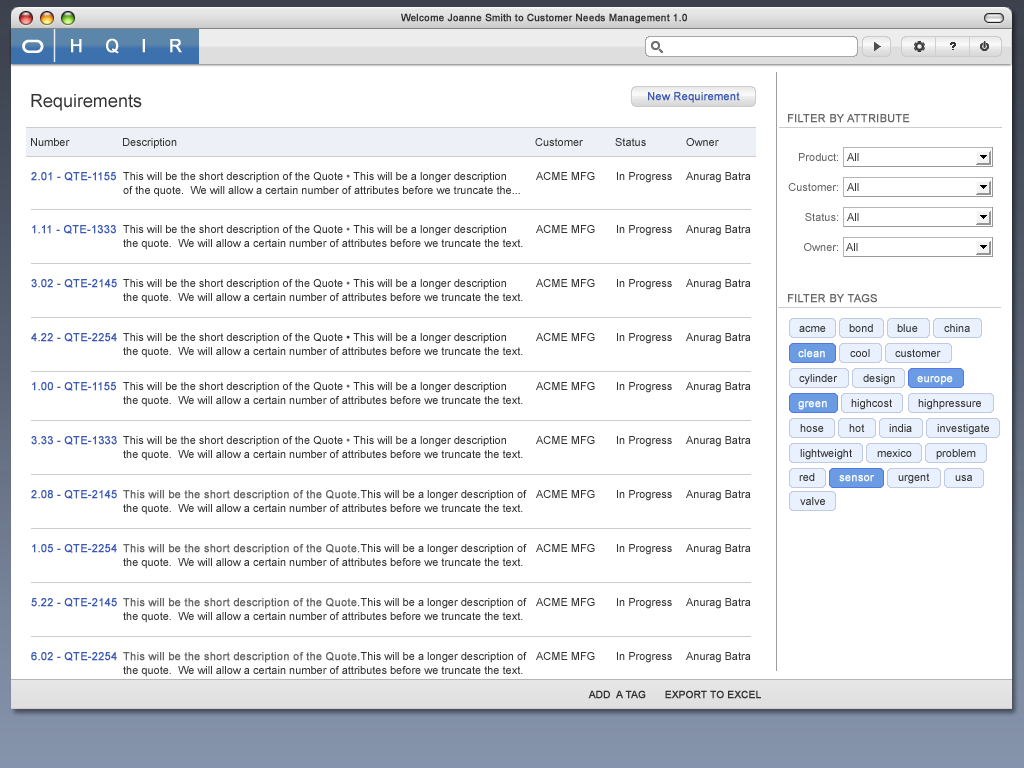
<style>
.page{position:relative;width:1024px;height:768px;background:#ffffff}
.page>*{position:absolute;margin:0}
.t1{font:10px "ArialMT";color:#333333;font-weight:bold}
.t2{font:18px "ArialMT";color:#ffffff;font-weight:bold}
.t3{font:18px "ArialMT";color:#333333}
.t4{font:11px "ArialMT";color:#3c5ab3;font-weight:bold}
.t5{font:11px "ArialMT";color:#666666;text-transform:uppercase;font-weight:bold}
.t6{font:11px "ArialMT";color:#333333}
.t7{font:11px "ArialMT";color:#666666}
.t8{font:11px/14px "ArialMT";color:#333333}
.t9{font:11px/20px "ArialMT";color:#333333}
.t10{font:11px/20px "ArialMT";color:#666666}
.t11{font:11px "ArialMT";color:#ffffff;font-weight:bold}
.t12{font:11px/20px "ArialMT";color:#666666;font-weight:bold}
.t13{font:10px "ArialMT";color:#333333;text-transform:uppercase;font-weight:bold}
</style>
<div class="page">
<p class="t1" style="left:401px;top:13px;width:286px;height:11px">Welcome Joanne Smith to Customer Needs Management 1.0</p>
<p class="t2" style="left:71px;top:38px;width:111px;height:16px">H    Q    I    R</p>
<p class="t3" style="left:31px;top:94px;width:111px;height:17px">Requirements</p>
<p class="t4" style="left:648px;top:92px;width:92px;height:11px">New Requirement</p>
<p class="t5" style="left:788px;top:114px;width:122px;height:9px">Filter by attribute</p>
<p class="t6" style="left:31px;top:138px;width:39px;height:8px">Number</p>
<p class="t6" style="left:123px;top:138px;width:54px;height:11px">Description</p>
<p class="t6" style="left:535px;top:138px;width:48px;height:8px">Customer</p>
<p class="t6" style="left:615px;top:138px;width:31px;height:8px">Status</p>
<p class="t6" style="left:686px;top:138px;width:33px;height:8px">Owner</p>
<p class="t7" style="left:799px;top:153px;width:39px;height:8px">Product:</p>
<p class="t6" style="left:847px;top:153px;width:12px;height:8px">All</p>
<p class="t4" style="left:31px;top:172px;width:85px;height:9px">2.01 - QTE-1155</p>
<p class="t8" style="left:123px;top:172px;width:397px;height:25px"><span class="t9">This will be the short description of the Quote </span><span class="t10">• </span>This will be a longer description <br>of the quote.  We will allow a certain number of attributes before we truncate the...</p>
<p class="t6" style="left:536px;top:172px;width:59px;height:8px">ACME MFG</p>
<p class="t6" style="left:617px;top:172px;width:55px;height:11px">In Progress</p>
<p class="t6" style="left:686px;top:172px;width:65px;height:11px">Anurag Batra</p>
<p class="t7" style="left:788px;top:183px;width:50px;height:8px">Customer:</p>
<p class="t6" style="left:847px;top:183px;width:12px;height:8px">All</p>
<p class="t7" style="left:805px;top:213px;width:33px;height:8px">Status:</p>
<p class="t6" style="left:847px;top:213px;width:12px;height:8px">All</p>
<p class="t4" style="left:32px;top:225px;width:84px;height:9px">1.11 - QTE-1333</p>
<p class="t8" style="left:123px;top:225px;width:400px;height:25px"><span class="t9">This will be the short description of the Quote</span><span class="t10"> • </span>This will be a longer description  <br>the quote.  We will allow a certain number of attributes before we truncate the text.</p>
<p class="t6" style="left:536px;top:225px;width:59px;height:8px">ACME MFG</p>
<p class="t6" style="left:617px;top:225px;width:55px;height:11px">In Progress</p>
<p class="t6" style="left:686px;top:225px;width:65px;height:11px">Anurag Batra</p>
<p class="t7" style="left:804px;top:243px;width:34px;height:8px">Owner:</p>
<p class="t6" style="left:846px;top:243px;width:12px;height:8px">All</p>
<p class="t4" style="left:31px;top:279px;width:86px;height:9px">3.02 - QTE-2145</p>
<p class="t8" style="left:123px;top:279px;width:400px;height:25px"><span class="t9">This will be the short description of the Quote</span><span class="t10"> • </span>This will be a longer description <br>the quote.  We will allow a certain number of attributes before we truncate the text.</p>
<p class="t6" style="left:536px;top:279px;width:59px;height:8px">ACME MFG</p>
<p class="t6" style="left:617px;top:279px;width:55px;height:11px">In Progress</p>
<p class="t6" style="left:686px;top:279px;width:65px;height:11px">Anurag Batra</p>
<p class="t5" style="left:788px;top:294px;width:89px;height:9px">filter By tags</p>
<p class="t6" style="left:799px;top:326px;width:27px;height:6px">acme</p>
<p class="t6" style="left:849px;top:324px;width:24px;height:8px">bond</p>
<p class="t6" style="left:897px;top:324px;width:21px;height:8px">blue</p>
<p class="t6" style="left:944px;top:324px;width:26px;height:8px">china</p>
<p class="t4" style="left:31px;top:333px;width:86px;height:9px">4.22 - QTE-2254</p>
<p class="t8" style="left:123px;top:333px;width:400px;height:25px"><span class="t9">This will be the short description of the Quote • </span>This will be a longer description<br>the quote.  We will allow a certain number of attributes before we truncate the text.</p>
<p class="t6" style="left:536px;top:333px;width:59px;height:8px">ACME MFG</p>
<p class="t6" style="left:617px;top:333px;width:55px;height:11px">In Progress</p>
<p class="t6" style="left:686px;top:333px;width:65px;height:11px">Anurag Batra</p>
<p class="t11" style="left:798px;top:349px;width:27px;height:9px">clean</p>
<p class="t6" style="left:850px;top:349px;width:20px;height:8px">cool</p>
<p class="t6" style="left:895px;top:349px;width:46px;height:8px">customer</p>
<p class="t6" style="left:799px;top:374px;width:39px;height:11px">cylinder</p>
<p class="t6" style="left:863px;top:374px;width:32px;height:11px">design</p>
<p class="t11" style="left:917px;top:376px;width:36px;height:9px">europe</p>
<p class="t4" style="left:32px;top:382px;width:84px;height:9px">1.00 - QTE-1155</p>
<p class="t8" style="left:123px;top:382px;width:400px;height:25px"><span class="t9">This will be the short description of the Quote</span><span class="t10"> • </span>This will be a longer description <br>the quote.  We will allow a certain number of attributes before we truncate the text.</p>
<p class="t6" style="left:536px;top:382px;width:59px;height:8px">ACME MFG</p>
<p class="t6" style="left:617px;top:382px;width:55px;height:11px">In Progress</p>
<p class="t6" style="left:686px;top:382px;width:65px;height:11px">Anurag Batra</p>
<p class="t11" style="left:798px;top:401px;width:29px;height:9px">green</p>
<p class="t6" style="left:851px;top:399px;width:41px;height:11px">highcost</p>
<p class="t6" style="left:918px;top:399px;width:63px;height:11px">highpressure</p>
<p class="t6" style="left:800px;top:424px;width:24px;height:8px">hose</p>
<p class="t6" style="left:849px;top:424px;width:16px;height:8px">hot</p>
<p class="t6" style="left:889px;top:424px;width:23px;height:8px">india</p>
<p class="t6" style="left:937px;top:424px;width:52px;height:11px">investigate</p>
<p class="t4" style="left:31px;top:436px;width:86px;height:9px">3.33 - QTE-1333</p>
<p class="t8" style="left:123px;top:436px;width:400px;height:25px"><span class="t9">This will be the short description of the Quote</span><span class="t10"> • </span>This will be a longer description  <br>the quote.  We will allow a certain number of attributes before we truncate the text.</p>
<p class="t6" style="left:536px;top:436px;width:59px;height:8px">ACME MFG</p>
<p class="t6" style="left:617px;top:436px;width:55px;height:11px">In Progress</p>
<p class="t6" style="left:686px;top:436px;width:65px;height:11px">Anurag Batra</p>
<p class="t6" style="left:800px;top:449px;width:52px;height:11px">lightweight</p>
<p class="t6" style="left:877px;top:449px;width:35px;height:8px">mexico</p>
<p class="t6" style="left:936px;top:449px;width:40px;height:11px">problem</p>
<p class="t6" style="left:799px;top:473px;width:16px;height:8px">red</p>
<p class="t6" style="left:898px;top:473px;width:32px;height:11px">urgent</p>
<p class="t11" style="left:839px;top:475px;width:35px;height:7px">sensor</p>
<p class="t6" style="left:955px;top:475px;width:17px;height:6px">usa</p>
<p class="t4" style="left:31px;top:490px;width:86px;height:9px">2.08 - QTE-2145</p>
<p class="t8" style="left:123px;top:490px;width:404px;height:25px"><span class="t12">This will be the short description of the Quote.</span>This will be a longer description of <br>the quote.  We will allow a certain number of attributes before we truncate the text.</p>
<p class="t6" style="left:536px;top:490px;width:59px;height:8px">ACME MFG</p>
<p class="t6" style="left:617px;top:490px;width:55px;height:11px">In Progress</p>
<p class="t6" style="left:686px;top:490px;width:65px;height:11px">Anurag Batra</p>
<p class="t6" style="left:800px;top:497px;width:25px;height:8px">valve</p>
<p class="t4" style="left:32px;top:544px;width:85px;height:9px">1.05 - QTE-2254</p>
<p class="t8" style="left:123px;top:544px;width:404px;height:25px"><span class="t12">This will be the short description of the Quote.</span>This will be a longer description of <br>the quote.  We will allow a certain number of attributes before we truncate the text.</p>
<p class="t6" style="left:536px;top:544px;width:59px;height:8px">ACME MFG</p>
<p class="t6" style="left:617px;top:544px;width:55px;height:11px">In Progress</p>
<p class="t6" style="left:686px;top:544px;width:65px;height:11px">Anurag Batra</p>
<p class="t4" style="left:31px;top:598px;width:86px;height:9px">5.22 - QTE-2145</p>
<p class="t8" style="left:123px;top:598px;width:404px;height:25px"><span class="t12">This will be the short description of the Quote.</span>This will be a longer description of <br>the quote.  We will allow a certain number of attributes before we truncate the text.</p>
<p class="t6" style="left:536px;top:598px;width:59px;height:8px">ACME MFG</p>
<p class="t6" style="left:617px;top:598px;width:55px;height:11px">In Progress</p>
<p class="t6" style="left:686px;top:598px;width:65px;height:11px">Anurag Batra</p>
<p class="t4" style="left:31px;top:652px;width:86px;height:9px">6.02 - QTE-2254</p>
<p class="t8" style="left:123px;top:652px;width:404px;height:25px"><span class="t12">This will be the short description of the Quote.</span>This will be a longer description of <br>the quote.  We will allow a certain number of attributes before we truncate the text.</p>
<p class="t6" style="left:536px;top:652px;width:59px;height:8px">ACME MFG</p>
<p class="t6" style="left:617px;top:652px;width:55px;height:11px">In Progress</p>
<p class="t6" style="left:686px;top:652px;width:65px;height:11px">Anurag Batra</p>
<p class="t13" style="left:588px;top:690px;width:58px;height:9px">add  a tag</p>
<p class="t13" style="left:665px;top:690px;width:96px;height:9px">Export to excel</p>
</div>
